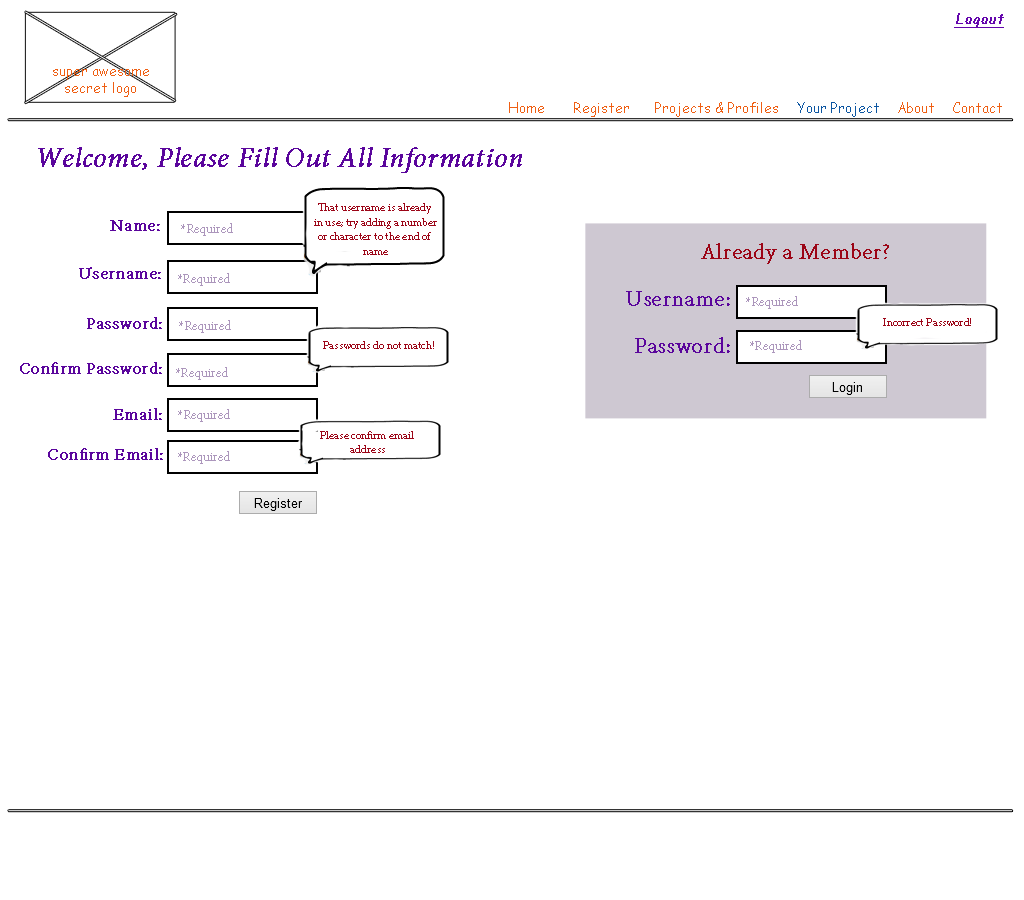
<style>
.page{position:relative;width:1024px;height:900px;background:#ffffff}
.page>*{position:absolute;margin:0}
.t1{font:14px "ComicSansMS";color:#6406ad;font-weight:bold;font-style:italic;text-decoration:underline}
.t2{font:14px "ComicSansMS";color:#ef5f13}
.t3{font:14px "ComicSansMS";color:#0c56a2}
.t4{font:30px "AdobeDevanagari-Italic";color:#5a059c;font-weight:bold}
.t5{font:12px "AdobeDevanagari-Regular";color:#9c0517;font-weight:bold}
.t6{font:18px "AdobeDevanagari-Regular";color:#5a059c;font-weight:bold}
.t7{font:14px "AdobeDevanagari-Regular";color:#ac96bc;font-weight:bold}
.t8{font:24px "AdobeDevanagari-Regular";color:#9c0517;font-weight:bold}
.t9{font:24px "AdobeDevanagari-Regular";color:#5a059c;font-weight:bold}
</style>
<div class="page">
<p class="t1" style="left:954px;top:13px;width:50px;height:15px">Logout</p>
<p class="t2" style="left:53px;top:69px;width:96px;height:28px;text-align:center">super awesome<br>secret logo</p>
<p class="t2" style="left:509px;top:102px;width:35px;height:11px">Home</p>
<p class="t2" style="left:574px;top:102px;width:55px;height:15px">Register</p>
<p class="t2" style="left:655px;top:102px;width:123px;height:15px">Projects &amp; Profiles</p>
<p class="t3" style="left:797px;top:102px;width:82px;height:15px">Your Project</p>
<p class="t2" style="left:898px;top:102px;width:36px;height:11px">About</p>
<p class="t2" style="left:953px;top:102px;width:49px;height:11px">Contact</p>
<p class="t4" style="left:38px;top:147px;width:484px;height:27px">Welcome, Please Fill Out All Information</p>
<p class="t5" style="left:314px;top:203px;width:123px;height:52px;text-align:center">That username is already <br>in use; try adding a number<br>or character to the end of <br>name</p>
<p class="t6" style="left:110px;top:220px;width:50px;height:11px">Name:</p>
<p class="t7" style="left:181px;top:223px;width:52px;height:13px">*Required</p>
<p class="t8" style="left:701px;top:243px;width:188px;height:21px">Already a Member?</p>
<p class="t6" style="left:79px;top:267px;width:82px;height:12px">Username:</p>
<p class="t7" style="left:178px;top:273px;width:52px;height:13px">*Required</p>
<p class="t9" style="left:626px;top:291px;width:104px;height:15px">Username:</p>
<p class="t7" style="left:746px;top:296px;width:52px;height:13px">*Required</p>
<p class="t6" style="left:87px;top:317px;width:75px;height:12px">Password:</p>
<p class="t5" style="left:883px;top:318px;width:88px;height:8px">Incorrect Password!</p>
<p class="t7" style="left:179px;top:320px;width:52px;height:13px">*Required</p>
<p class="t5" style="left:323px;top:341px;width:111px;height:8px">Passwords do not match!</p>
<p class="t9" style="left:635px;top:337px;width:95px;height:16px">Password:</p>
<p class="t7" style="left:750px;top:340px;width:52px;height:13px">*Required</p>
<p class="t6" style="left:20px;top:362px;width:142px;height:12px">Confirm Password:</p>
<p class="t7" style="left:176px;top:367px;width:52px;height:13px">*Required</p>
<p class="t6" style="left:113px;top:408px;width:49px;height:12px">Email:</p>
<p class="t7" style="left:178px;top:409px;width:52px;height:13px">*Required</p>
<p class="t5" style="left:320px;top:431px;width:94px;height:22px;text-align:center">Please confirm email <br>address</p>
<p class="t6" style="left:48px;top:448px;width:115px;height:12px">Confirm Email:</p>
<p class="t7" style="left:178px;top:451px;width:52px;height:13px">*Required</p>
</div>
